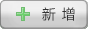
<style>
.page{position:relative;width:88px;height:29px}
.page>*{position:absolute;margin:0}
.t1{font:13.9px "MicrosoftYaHei";letter-spacing:0.45em;color:#333333}
</style>
<div class="page">
<p class="t1" style="left:42px;top:7px;width:33px;height:14px">新增</p>
<p class="t1" style="left:42px;top:7px;width:33px;height:14px">新增</p>
<p class="t1" style="left:42px;top:7px;width:33px;height:14px">新增</p>
</div>
